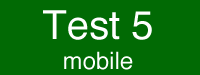
<style>
.page{position:relative;width:200px;height:75px;background:#016a04}
.page>*{position:absolute;margin:0}
.t1{font:40px/30px "Helvetica";color:#ffffff}
.t2{font:24px/30px "Helvetica";color:#ffffff}
</style>
<div class="page">
<p class="t1" style="left:43px;top:10px;width:109px;height:60px;text-align:center">Test 5<br><span class="t2">mobile</span></p>
</div>
